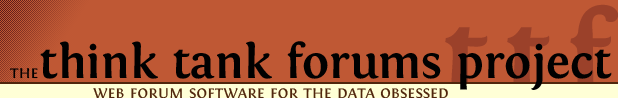
<style>
.page{position:relative;width:618px;height:98px;background:#bf5834}
.page>*{position:absolute;margin:0}
.t1{font:48px "Fontin-Bold";color:#010101}
.t2{font:18px "Fontin-SmallCaps";color:#010000}
.t3{font:18px "Fontin-SmallCaps";color:#50260d}
</style>
<div class="page">
<p class="t1" style="left:40px;top:41px;width:572px;height:49px">think tank forums project</p>
<p class="t2" style="left:10px;top:68px;width:28px;height:11px">the</p>
<p class="t3" style="left:93px;top:88px;width:355px;height:10px">web forum software for the data obsessed</p>
</div>
